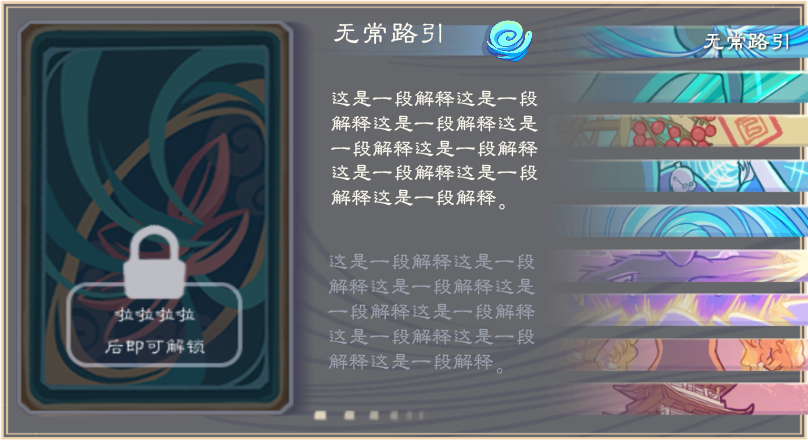
<style>
.page{position:relative;width:808px;height:441px;background:#66676b}
.page>*{position:absolute;margin:0}
.t1{font:28.7px "FZLBJW--GB1-0";color:#fffbf1}
.t2{font:20.8px "FZLBJW--GB1-0";color:#fffbf1}
.t3{font:20.8px "FZLBJW--GB1-0";color:#9aa1ad}
</style>
<div class="page">
<p class="t1" style="left:334px;top:22px;width:108px;height:22px">无常路引</p>
<p class="t2" style="left:331px;top:90px;width:207px;height:120px">这是一段解释这是一段解释这是一段解释这是一段解释这是一段解释这是一段解释这是一段解释这是一段解释。</p>
<p class="t3" style="left:328px;top:253px;width:207px;height:121px">这是一段解释这是一段解释这是一段解释这是一段解释这是一段解释这是一段解释这是一段解释这是一段解释。</p>
</div>
